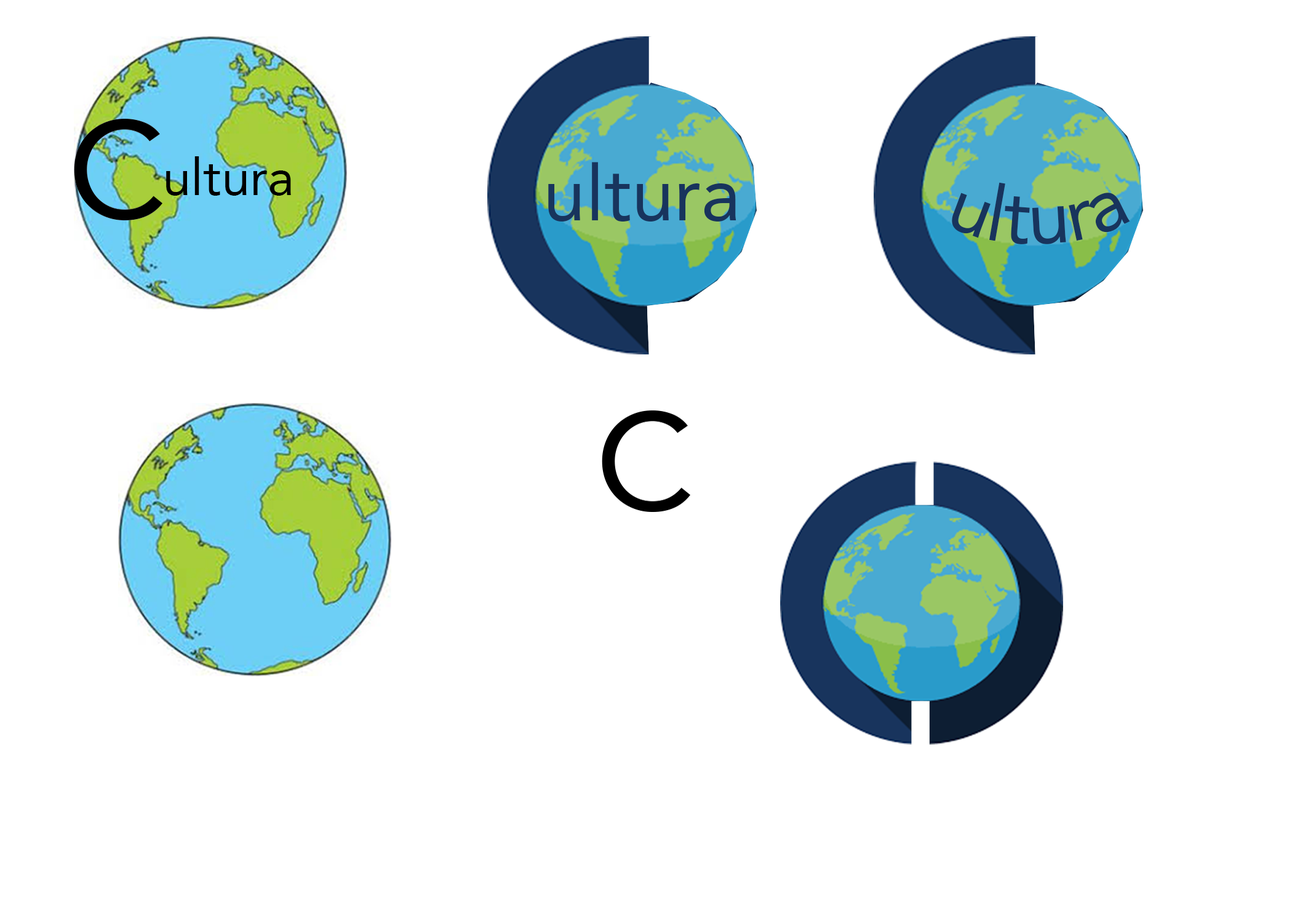
<style>
.page{position:relative;width:1292px;height:923px;background:#ffffff}
.page>*{position:absolute;margin:0}
.t1{font:51.3px "Avenir-Roman";color:#000000}
.t2{font:76.9px "Avenir-Roman";color:#18345d}
</style>
<div class="page">
<p class="t1" style="left:166px;top:156px;width:125px;height:40px">ultura</p>
<p class="t2" style="left:548px;top:162px;width:188px;height:59px">ultura</p>
<p class="t2" style="left:952px;top:182px;width:178px;height:62px">ultura</p>
</div>
